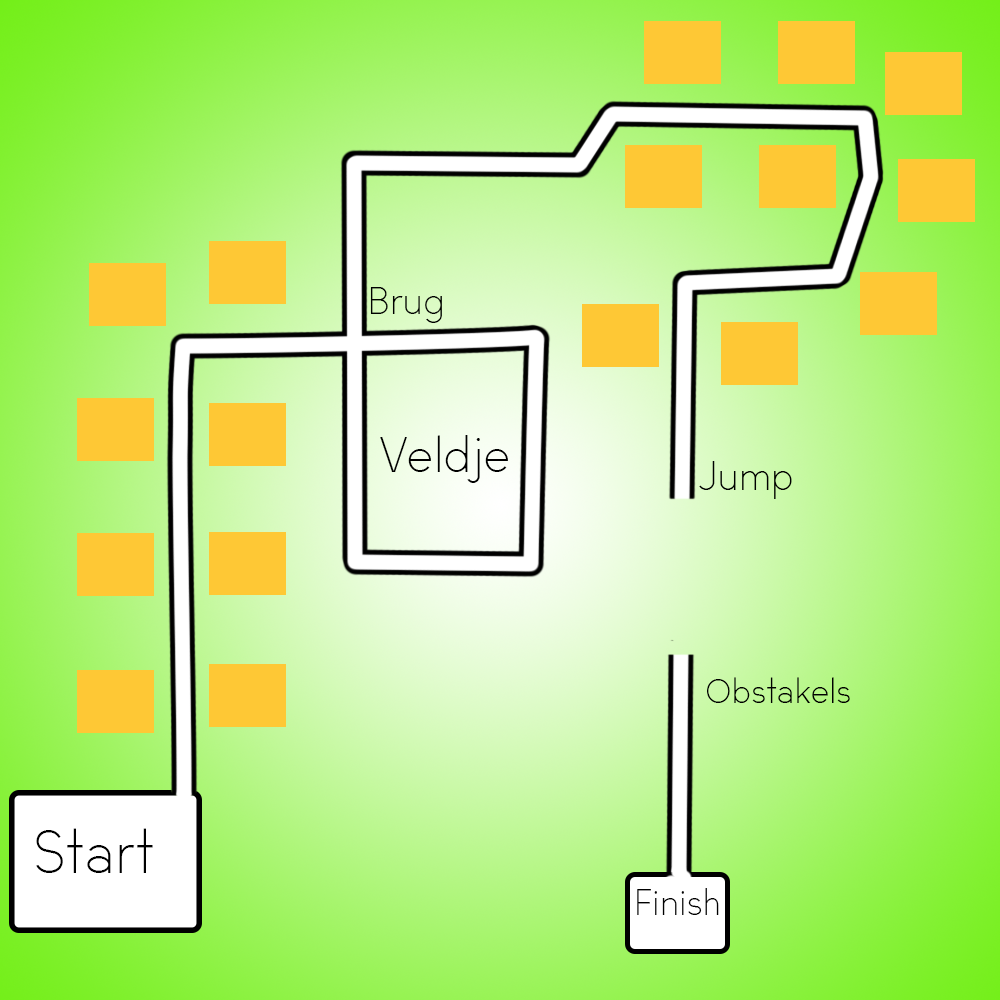
<style>
.page{position:relative;width:1000px;height:1000px}
.page>*{position:absolute;margin:0}
.t1{font:30.6px "BlackLabel-Light";color:#000000}
.t2{font:39.6px "BlackLabel-Light";color:#000000}
.t3{font:31.9px "BlackLabel-Light";color:#000000}
.t4{font:27.1px "BlackLabel-Light";color:#000000}
.t5{font:47.2px "BlackLabel-Light";color:#000000}
.t6{font:28.8px "BlackLabel-Light";color:#000000}
</style>
<div class="page">
<p class="t1" style="left:370px;top:287px;width:72px;height:36px">Brug</p>
<p class="t2" style="left:380px;top:435px;width:128px;height:48px">Veldje</p>
<p class="t3" style="left:699px;top:461px;width:93px;height:38px">Jump</p>
<p class="t4" style="left:707px;top:677px;width:143px;height:26px">Obstakels</p>
<p class="t5" style="left:36px;top:828px;width:117px;height:45px">Start</p>
<p class="t6" style="left:637px;top:888px;width:82px;height:27px">Finish</p>
</div>
